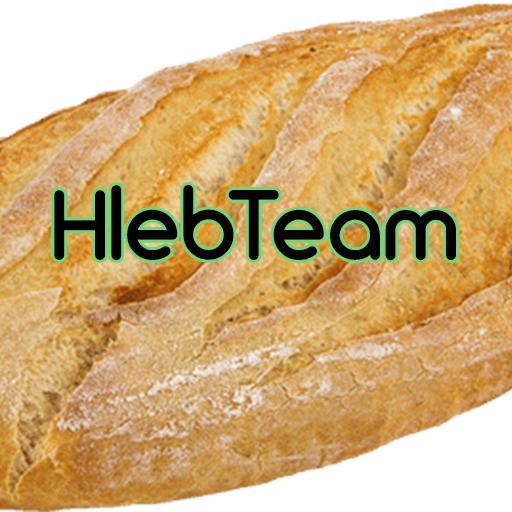
<style>
.page{position:relative;width:512px;height:512px}
.page>*{position:absolute;margin:0}
.t1{font:100px "ArciformSanscyr-lat-Regular";color:#000000}
</style>
<div class="page">
<p class="t1" style="left:54px;top:185px;width:402px;height:76px">HlebTeam</p>
</div>
